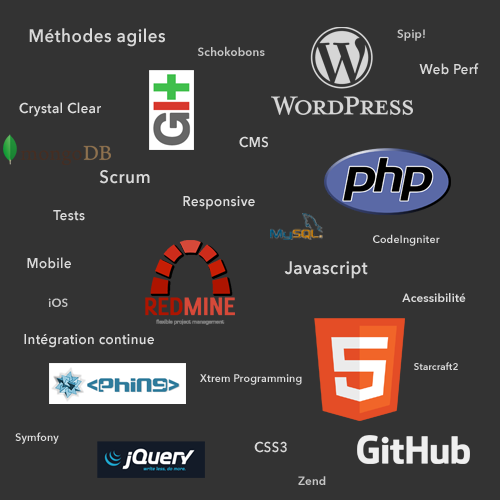
<style>
.page{position:relative;width:500px;height:500px;background:#333333}
.page>*{position:absolute;margin:0}
.t1{font:18px "AvenirNext-DemiBold";letter-spacing:0.025em;color:#d8d8d8;scale:0.95 1}
.t2{font:12px "AvenirNext-DemiBold";letter-spacing:0.025em;color:#c6c6c6;scale:0.95 1}
.t3{font:14px "AvenirNext-DemiBold";letter-spacing:0.025em;color:#d8d8d8;scale:0.95 1}
.t4{font:14px "AvenirNext-DemiBold";letter-spacing:0.025em;color:#dddddd;scale:0.95 1}
.t5{font:11px "AvenirNext-DemiBold";letter-spacing:0.025em;color:#dddddd;scale:0.95 1}
.t6{font:12px "AvenirNext-DemiBold";letter-spacing:0.025em;color:#dddddd;scale:0.95 1}
.t7{font:10px "AvenirNext-DemiBold";letter-spacing:0.025em;color:#d8d8d8;scale:0.95 1}
</style>
<div class="page">
<p class="t1" style="left:29px;top:28px;width:136px;height:19px">Méthodes agiles</p>
<p class="t2" style="left:397px;top:29px;width:28px;height:12px">Spip!</p>
<p class="t2" style="left:197px;top:46px;width:68px;height:10px">Schokobons</p>
<p class="t3" style="left:419px;top:63px;width:60px;height:12px">Web Perf</p>
<p class="t4" style="left:19px;top:102px;width:82px;height:15px">Crystal Clear</p>
<p class="t4" style="left:239px;top:136px;width:29px;height:12px">CMS</p>
<p class="t1" style="left:99px;top:170px;width:51px;height:14px">Scrum</p>
<p class="t4" style="left:183px;top:196px;width:72px;height:14px">Responsive</p>
<p class="t4" style="left:53px;top:210px;width:32px;height:11px">Tests</p>
<p class="t5" style="left:373px;top:234px;width:67px;height:12px">CodeIngniter</p>
<p class="t3" style="left:27px;top:257px;width:44px;height:12px">Mobile</p>
<p class="t1" style="left:284px;top:261px;width:84px;height:18px">Javascript</p>
<p class="t6" style="left:402px;top:293px;width:64px;height:9px">Acessibilité</p>
<p class="t2" style="left:48px;top:298px;width:20px;height:9px">iOS</p>
<p class="t4" style="left:24px;top:334px;width:130px;height:14px">Intégration continue</p>
<p class="t7" style="left:414px;top:362px;width:44px;height:8px">Starcraft2</p>
<p class="t5" style="left:200px;top:374px;width:102px;height:11px">Xtrem Programming</p>
<p class="t5" style="left:15px;top:432px;width:44px;height:12px">Symfony</p>
<p class="t3" style="left:254px;top:441px;width:33px;height:12px">CSS3</p>
<p class="t2" style="left:298px;top:476px;width:28px;height:9px">Zend</p>
</div>
